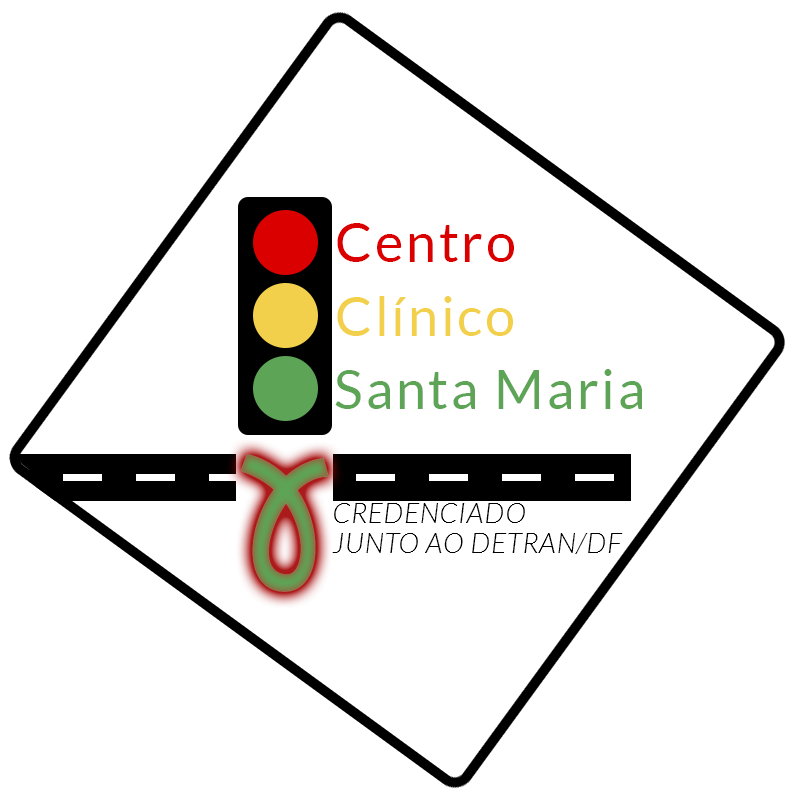
<style>
.page{position:relative;width:800px;height:800px;background:#ffffff}
.page>*{position:absolute;margin:0}
.t1{font:54px "Lato-Regular";letter-spacing:0.05em;color:#db0000}
.t2{font:54px "Lato-Regular";letter-spacing:0.05em;color:#f3d04b}
.t3{font:54px "Lato-Regular";letter-spacing:0.05em;color:#5da457}
.t4{font:28px/30px "Lato-LightItalic";letter-spacing:0.025em;color:#000000;text-transform:uppercase}
</style>
<div class="page">
<p class="t1" style="left:337px;top:223px;width:177px;height:39px">Centro</p>
<p class="t2" style="left:337px;top:296px;width:176px;height:40px">Clínico</p>
<p class="t3" style="left:335px;top:369px;width:307px;height:40px">Santa Maria</p>
<p class="t4" style="left:332px;top:503px;width:291px;height:51px">Credenciado<br>Junto ao DETRAN/DF</p>
</div>
